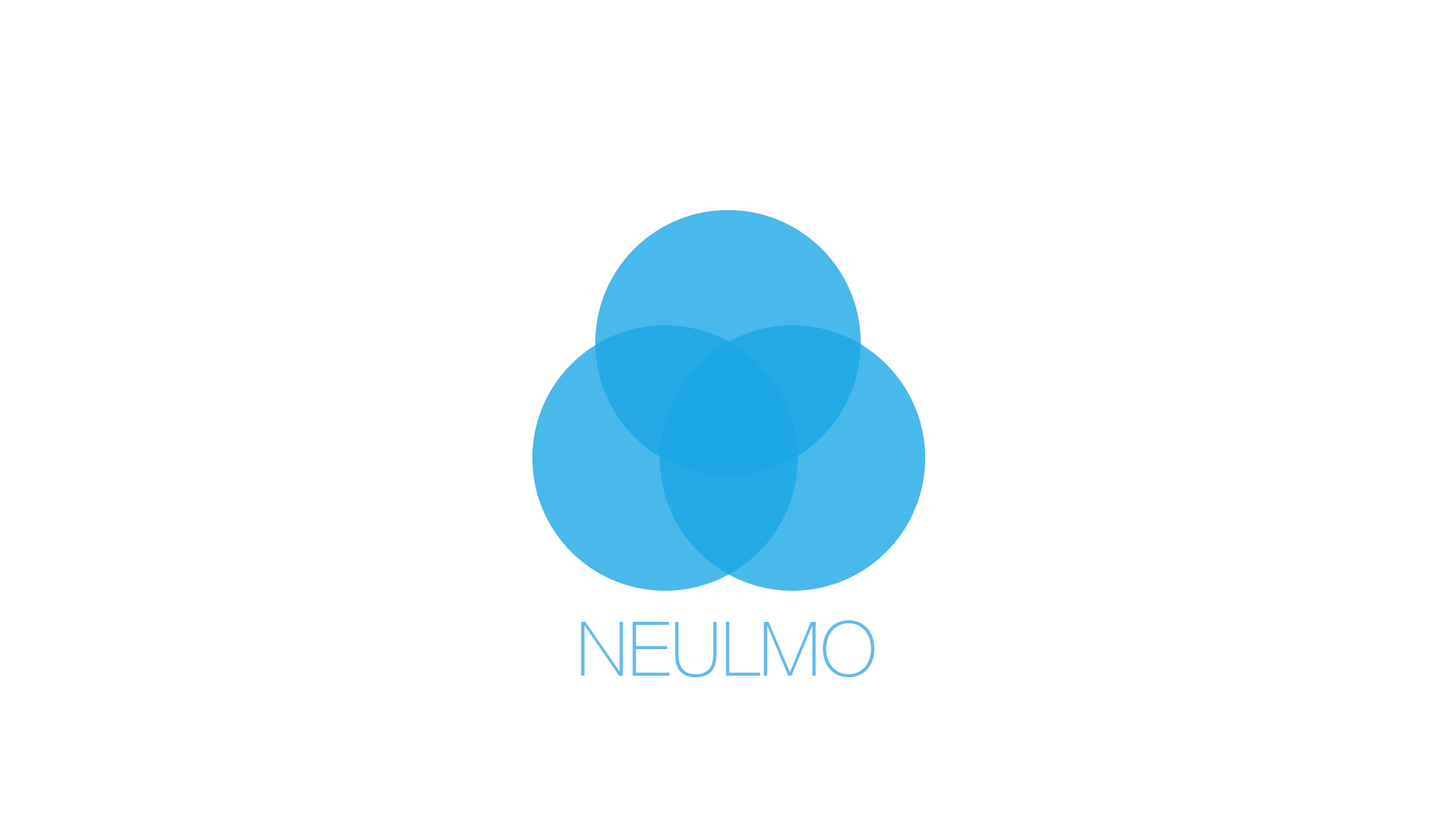
<style>
.page{position:relative;width:1456px;height:819px;background:#ffffff}
.page>*{position:absolute;margin:0}
.t1{font:75.8px "HelveticaNeue-Thin";color:#62baeb}
</style>
<div class="page">
<p class="t1" style="left:581px;top:620px;width:293px;height:57px">NEULMO</p>
</div>
